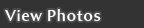
<style>
.page{position:relative;width:144px;height:28px;background:#333333}
.page>*{position:absolute;margin:0}
.t1{font:16px "AmiraParadiso";letter-spacing:0.05em;color:#ffffff}
</style>
<div class="page">
<p class="t1" style="left:5px;top:9px;width:96px;height:12px">View Photos</p>
</div>
